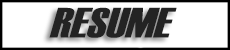
<style>
.page{position:relative;width:230px;height:50px;background:#ffffff}
.page>*{position:absolute;margin:0}
.t1{font:43.7px "Haettenschweiler";color:#232323;scale:1.14 1}
</style>
<div class="page">
<p class="t1" style="left:49px;top:7px;width:128px;height:31px">RESUME</p>
</div>
